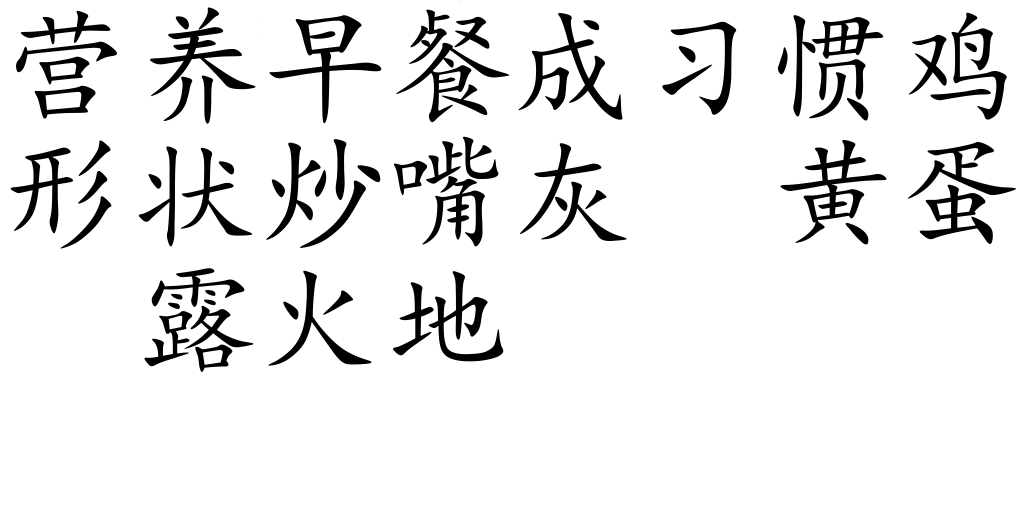
<style>
.page{position:relative;width:1024px;height:512px;background:#ffffff}
.page>*{position:absolute;margin:0}
.t1{font:125px "KaiTi";color:#000000}
.t2{font:120.6px "KaiTi";color:#000000}
.t3{font:128.1px "KaiTi";color:#000000}
</style>
<div class="page">
<p class="t1" style="left:16px;top:10px;width:101px;height:109px">营</p>
<p class="t1" style="left:150px;top:7px;width:106px;height:117px">养</p>
<p class="t1" style="left:269px;top:15px;width:113px;height:109px">早</p>
<p class="t1" style="left:396px;top:9px;width:114px;height:114px">餐</p>
<p class="t2" style="left:518px;top:13px;width:105px;height:107px">成</p>
<p class="t2" style="left:777px;top:15px;width:107px;height:106px">惯</p>
<p class="t2" style="left:908px;top:12px;width:99px;height:108px">鸡</p>
<p class="t2" style="left:662px;top:21px;width:75px;height:94px">习</p>
<p class="t2" style="left:394px;top:136px;width:105px;height:111px">嘴</p>
<p class="t1" style="left:10px;top:140px;width:102px;height:109px">形</p>
<p class="t1" style="left:138px;top:146px;width:115px;height:101px">状</p>
<p class="t3" style="left:266px;top:139px;width:115px;height:109px">炒</p>
<p class="t2" style="left:519px;top:143px;width:108px;height:98px">灰</p>
<p class="t2" style="left:780px;top:139px;width:107px;height:106px">黄</p>
<p class="t2" style="left:908px;top:142px;width:109px;height:102px">蛋</p>
<p class="t2" style="left:144px;top:268px;width:110px;height:104px">露</p>
<p class="t2" style="left:268px;top:270px;width:104px;height:96px">火</p>
<p class="t2" style="left:393px;top:271px;width:111px;height:91px">地</p>
</div>
